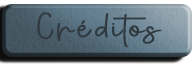
<style>
.page{position:relative;width:192px;height:64px}
.page>*{position:absolute;margin:0}
.t1{font:39.2px "EverythingRegular";letter-spacing:0.025em;color:#303a40;scale:1.17 1}
</style>
<div class="page">
<p class="t1" style="left:37px;top:12px;width:125px;height:36px">Créditos</p>
</div>
